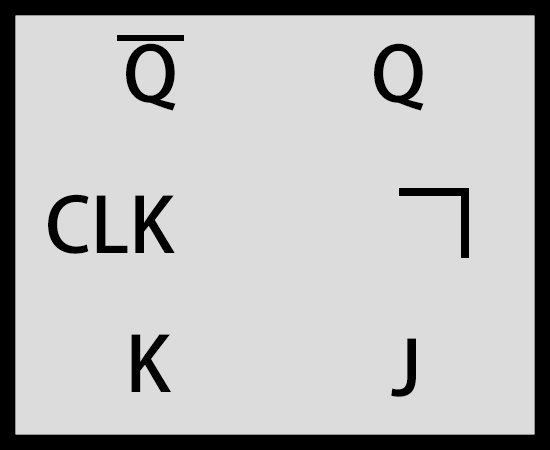
<style>
.page{position:relative;width:550px;height:450px;background:#dcdcdc}
.page>*{position:absolute;margin:0}
.t1{font:75px "AdobeHeitiStd-Regular";color:#000000}
</style>
<div class="page">
<p class="t1" style="left:126px;top:43px;width:50px;height:68px">Q</p>
<p class="t1" style="left:374px;top:43px;width:50px;height:68px">Q</p>
<p class="t1" style="left:48px;top:194px;width:127px;height:60px">CLK</p>
<p class="t1" style="left:131px;top:334px;width:40px;height:58px">K</p>
<p class="t1" style="left:391px;top:338px;width:25px;height:59px">J</p>
</div>
